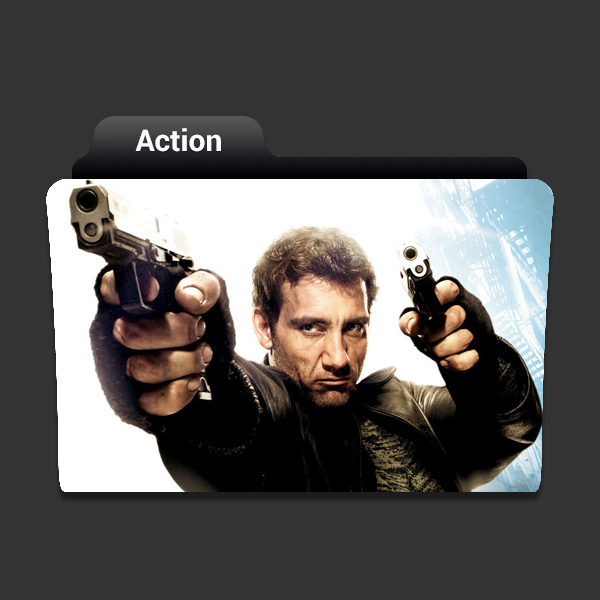
<style>
.page{position:relative;width:600px;height:600px;background:#333333}
.page>*{position:absolute;margin:0}
.t1{font:30px "Roboto-Bold";color:#ffffff}
</style>
<div class="page">
<p class="t1" style="left:135px;top:128px;width:86px;height:24px">Action</p>
</div>
